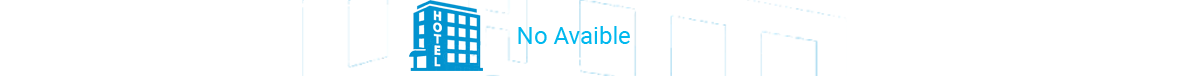
<style>
.page{position:relative;width:1201px;height:76px;background:#ffffff}
.page>*{position:absolute;margin:0}
.t1{font:24px "Roboto-Regular";color:#00b8ee}
</style>
<div class="page">
<p class="t1" style="left:518px;top:26px;width:112px;height:18px">No Avaible</p>
</div>
